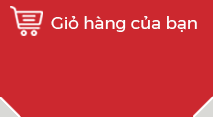
<style>
.page{position:relative;width:213px;height:117px;background:#cc282f}
.page>*{position:absolute;margin:0}
.t1{font:16.2px "Montserrat-Regular";color:#ffffff;scale:1.05 1}
</style>
<div class="page">
<p class="t1" style="left:51px;top:16px;width:146px;height:16px">Giỏ hàng của bạn</p>
</div>
